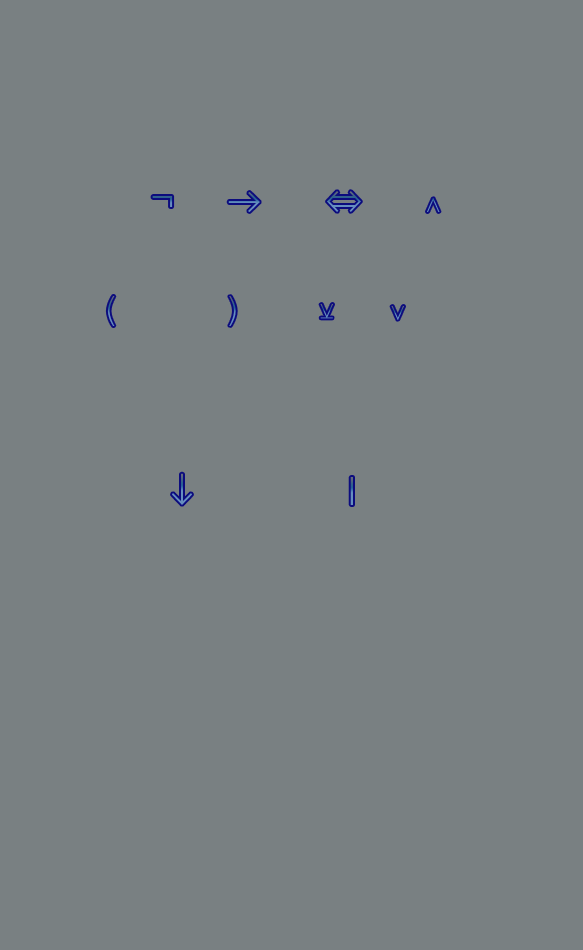
<style>
.page{position:relative;width:583px;height:950px;background:#798082}
.page>*{position:absolute;margin:0}
.t1{font:48px "Mathematica1Mono"}
.t2{font:24px "Mathematica1Mono"}
.t3{font:36px "Mathematica1Mono"}
.t4{font:30px "ArialMT"}
</style>
<div class="page">
<p class="t1" style="left:152px;top:191px;width:288px;height:21px">Ø    ®          <span class="t2">Ù</span></p>
<p class="t3" style="left:107px;top:296px;width:129px;height:30px">(           )</p>
<p class="t4" style="left:350px;top:477px;width:3px;height:28px">|</p>
</div>
